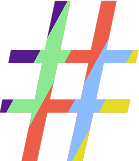
<style>
.page{position:relative;width:139px;height:161px;background:#ffffff}
.page>*{position:absolute;margin:0}
.t1{font:250px "SegoeWP"}
</style>
<div class="page">
<p class="t1" style="left:0px;top:0px;width:139px;height:161px">#</p>
</div>
